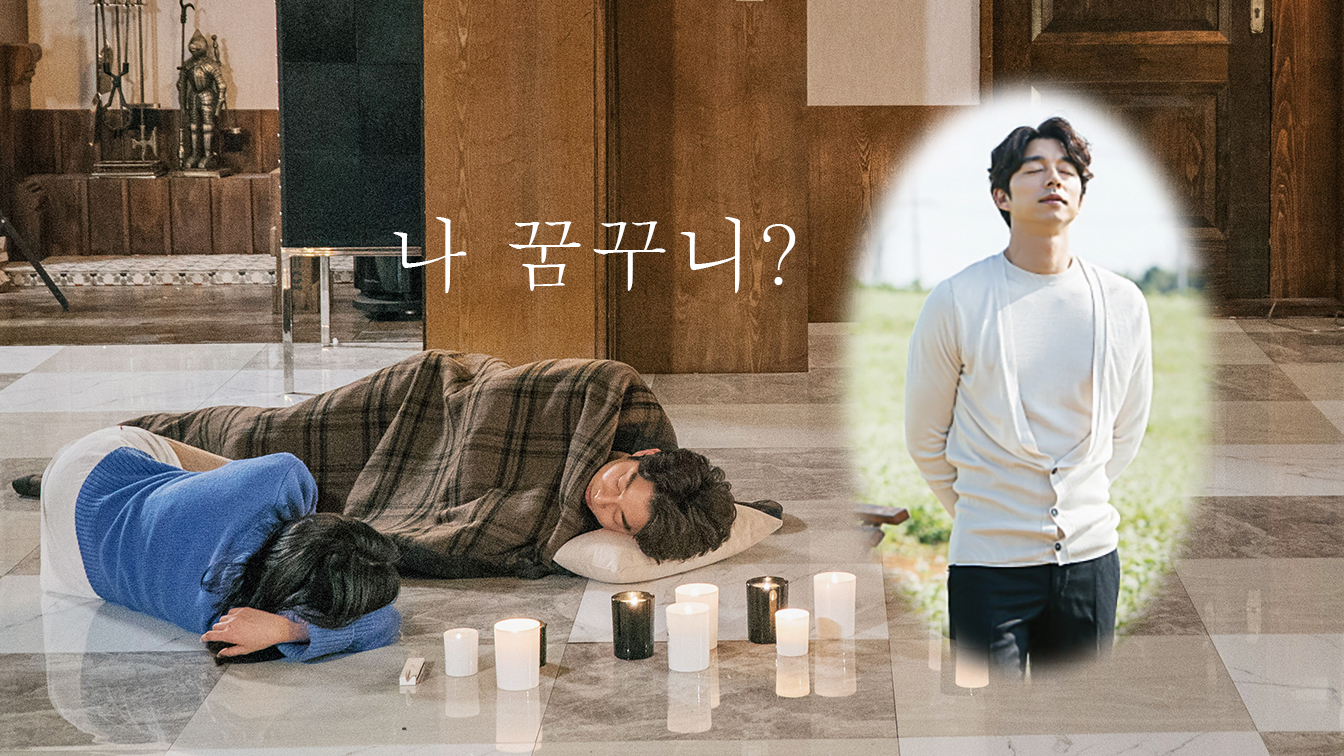
<style>
.page{position:relative;width:1344px;height:756px}
.page>*{position:absolute;margin:0}
.t1{font:81px "Batang";letter-spacing:0.05em;color:#ffffff}
</style>
<div class="page">
<p class="t1" style="left:393px;top:217px;width:403px;height:76px">나 꿈꾸니?</p>
</div>
